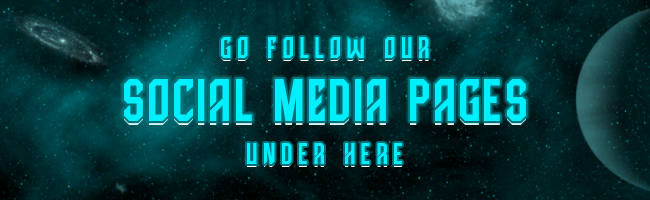
<style>
.page{position:relative;width:650px;height:200px}
.page>*{position:absolute;margin:0}
.t1{font:30px "HighJersey";letter-spacing:0.2em;color:#00efff}
.t2{font:60px "HighJersey";letter-spacing:0.05em;color:#00efff}
</style>
<div class="page">
<p class="t1" style="left:221px;top:37px;width:208px;height:21px">Go FolloW ouR</p>
<p class="t2" style="left:124px;top:79px;width:402px;height:42px">SoCiAl mEdiA pAGeS</p>
<p class="t1" style="left:247px;top:143px;width:155px;height:21px">uNdeR HeRe</p>
</div>
